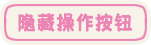
<style>
.page{position:relative;width:151px;height:45px;background:#f7f3e9}
.page>*{position:absolute;margin:0}
.t1{font:12px "shetumodengxiaofangti";color:#eb84b4;font-weight:bold;scale:0.94 1}
</style>
<div class="page">
<p class="t1" style="left:18px;top:13px;width:114px;height:19px">隐藏操作按钮</p>
</div>
